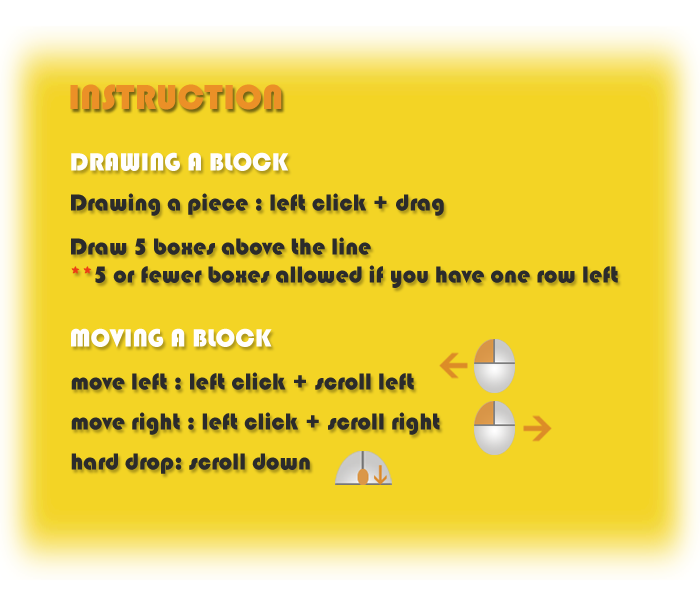
<style>
.page{position:relative;width:700px;height:600px;background:#f3d425}
.page>*{position:absolute;margin:0}
.t1{font:36px "Bauhaus93";color:#eb9027}
.t2{font:26px "Bauhaus93";color:#fffefd}
.t3{font:24px/20px "Bauhaus93";color:#2b2b2b}
.t4{font:24px/14px "Bauhaus93";color:#ec3e15}
.t5{font:24px/14px "Bauhaus93";color:#2b2b2b}
</style>
<div class="page">
<p class="t1" style="left:70px;top:84px;width:212px;height:26px">INSTRUCTION</p>
<p class="t2" style="left:71px;top:152px;width:218px;height:19px">DRAWING A BLOCK</p>
<p class="t3" style="left:71px;top:193px;width:547px;height:95px">Drawing a piece : left click + drag<br><br>Draw 5 boxes above the line<br><br><span class="t4">**</span><span class="t5">5 or fewer boxes allowed if you have one row left</span></p>
<p class="t2" style="left:71px;top:328px;width:201px;height:20px">MOVING A BLOCK</p>
<p class="t3" style="left:71px;top:372px;width:369px;height:102px">move left : left click + scroll left<br><br>move right : left click + scroll right<br><br>hard drop: scroll down</p>
</div>
